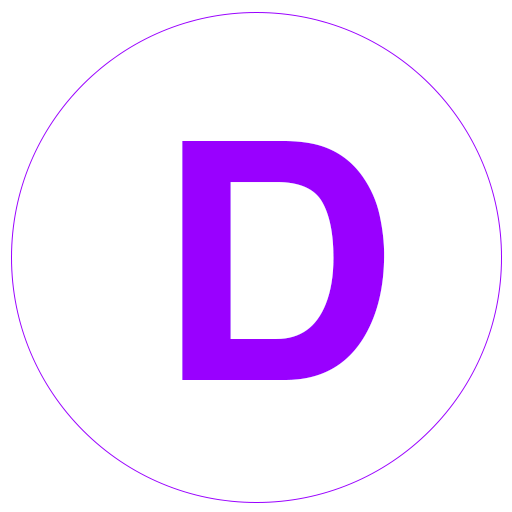
<style>
.page{position:relative;width:512px;height:512px;background:#ffffff}
.page>*{position:absolute;margin:0}
.t1{font:331.5px "Helvetica-Bold";letter-spacing:0.025em;color:#9900ff;font-variant:small-caps}
</style>
<div class="page">
<p class="t1" style="left:182px;top:141px;width:203px;height:239px">D</p>
</div>
